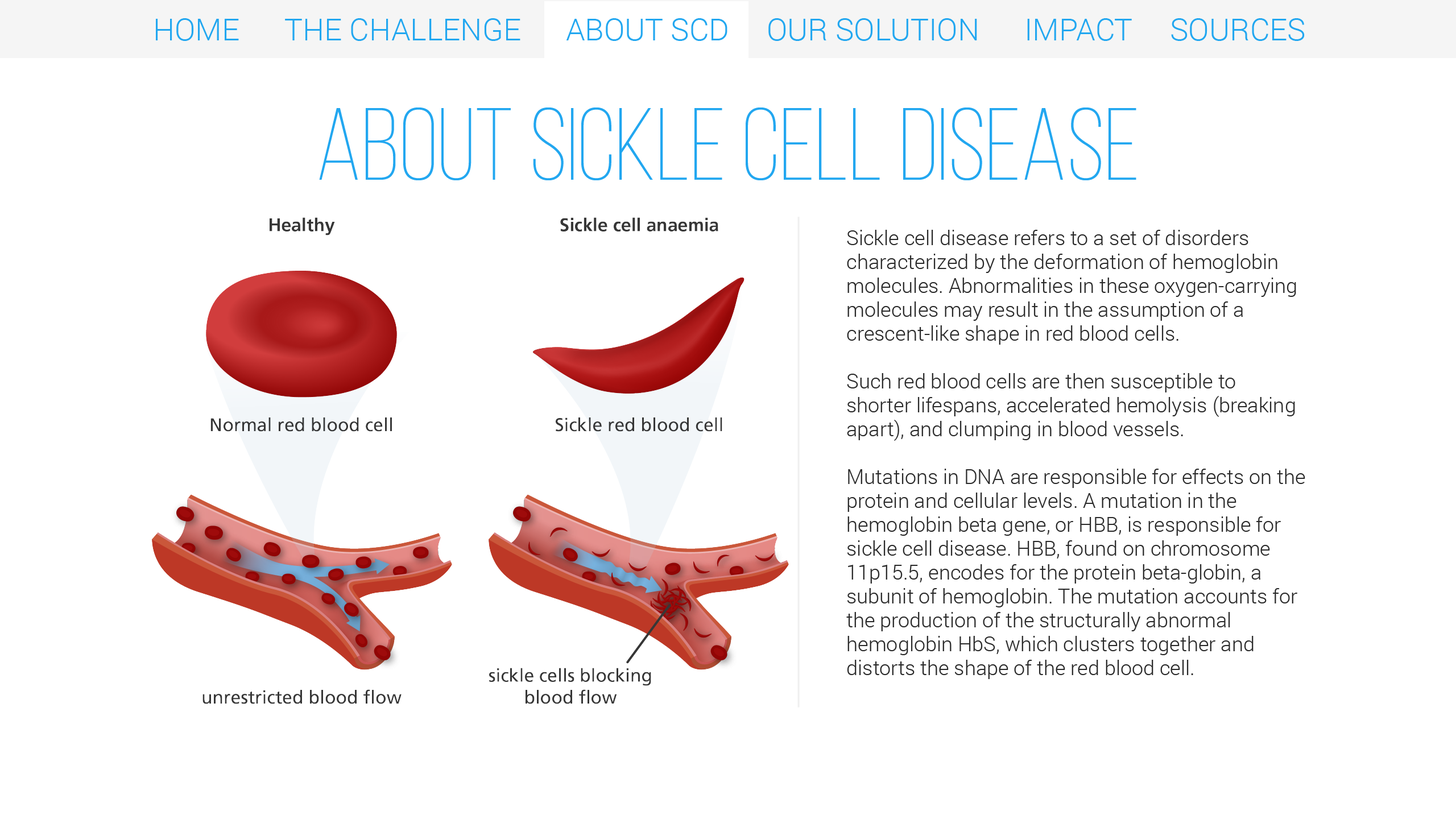
<style>
.page{position:relative;width:1456px;height:819px;background:#ffffff}
.page>*{position:absolute;margin:0}
.t1{font:30.7px "Roboto-Light";color:#22a7f0}
.t2{font:102.4px "BebasNeueLight";color:#22a7f0}
.t3{font:20.5px/23.9px "Roboto-Light";color:#2a2a2a}
</style>
<div class="page">
<p class="t1" style="left:156px;top:18px;width:1149px;height:23px">HOME      THE CHALLENGE      ABOUT SCD     OUR SOLUTION      IMPACT     SOURCES</p>
<p class="t2" style="left:319px;top:107px;width:817px;height:73px">ABOUT SICKLE CELL DISEASE</p>
<p class="t3" style="left:846px;top:230px;width:459px;height:449px">Sickle cell disease refers to a set of disorders<br>characterized by the deformation of hemoglobin molecules. Abnormalities in these oxygen-carrying molecules may result in the assumption of a crescent-like shape in red blood cells.<br><br>Such red blood cells are then susceptible to<br>shorter lifespans, accelerated hemolysis (breaking apart), and clumping in blood vessels.<br><br>Mutations in DNA are responsible for effects on the protein and cellular levels. A mutation in the<br>hemoglobin beta gene, or HBB, is responsible for sickle cell disease. HBB, found on chromosome 11p15.5, encodes for the protein beta-globin, a subunit of hemoglobin. The mutation accounts for the production of the structurally abnormal<br>hemoglobin HbS, which clusters together and<br>distorts the shape of the red blood cell.</p>
</div>
